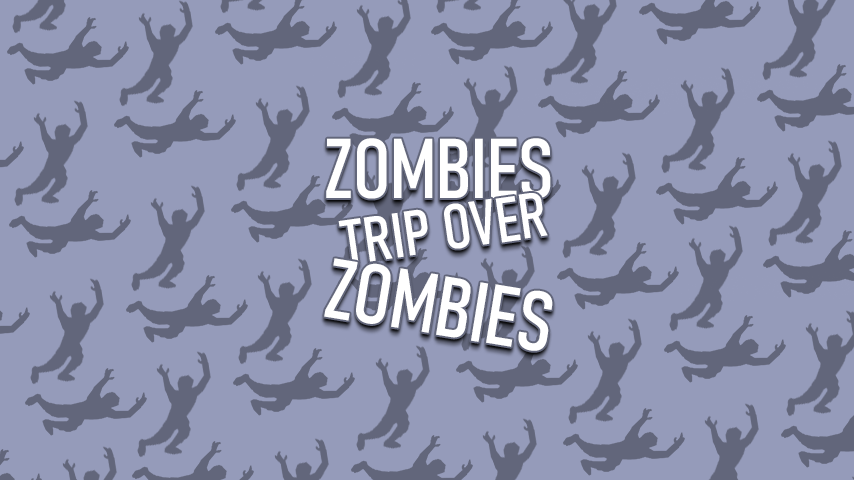
<style>
.page{position:relative;width:854px;height:480px;background:#959bba}
.page>*{position:absolute;margin:0}
.t1{font:83.3px "Bahnschrift-Condensed";color:#ffffff;font-weight:bold}
.t2{font:62.5px "Bahnschrift-Condensed";color:#ffffff;font-weight:bold}
</style>
<div class="page">
<p class="t1" style="left:326px;top:138px;width:225px;height:61px">ZOMBIES</p>
<p class="t2" style="left:338px;top:193px;width:210px;height:71px;rotate:-8deg">TRIP OVER</p>
<p class="t1" style="left:324px;top:258px;width:229px;height:93px;rotate:9deg">ZOMBIES</p>
</div>
